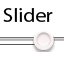
<style>
.page{position:relative;width:64px;height:64px;background:#ffffff}
.page>*{position:absolute;margin:0}
.t1{font:19.5px "MyriadPro-Regular";color:#000000;scale:1.1 1}
</style>
<div class="page">
<p class="t1" style="left:3px;top:8px;width:50px;height:14px">Slider</p>
</div>
